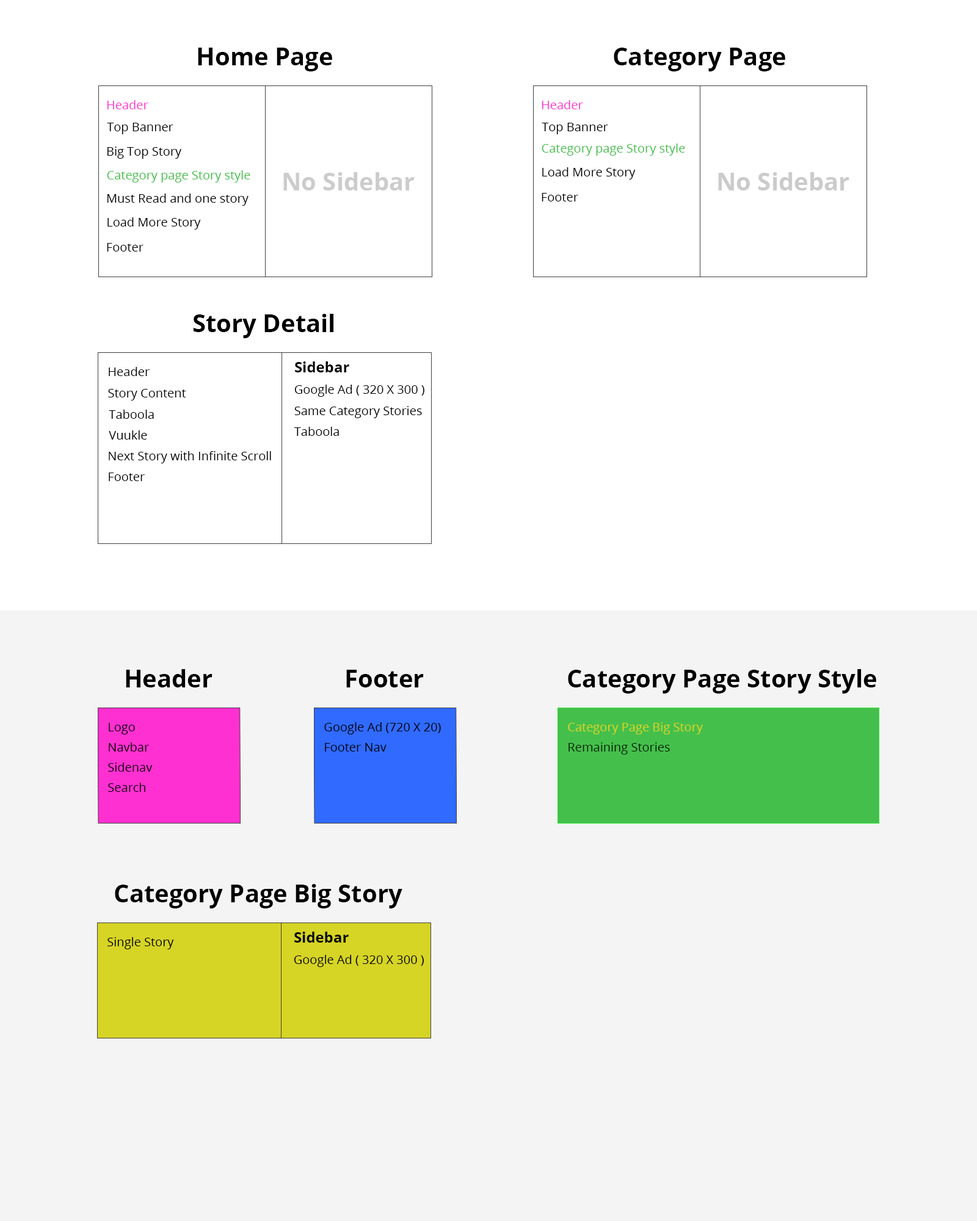
<style>
.page{position:relative;width:977px;height:1221px;background:#ffffff}
.page>*{position:absolute;margin:0}
.t1{font:24.4px "OpenSans-Bold";color:#000000}
.t2{font:12.2px "OpenSans-Regular";color:#ff30d1}
.t3{font:12.2px "OpenSans-Regular";color:#000000}
.t4{font:12.2px "OpenSans-Regular";color:#45bf4b}
.t5{font:24.4px "OpenSans-Bold";color:#cbcbcb}
.t6{font:14.7px "OpenSans-Bold";color:#000000}
.t7{font:12.2px/20.1px "OpenSans-Regular";color:#000000}
.t8{font:12.2px/20.1px "OpenSans-Regular";color:#d6d425}
.t9{font:12.2px/20.1px "OpenSans-Regular";color:#052107}
</style>
<div class="page">
<p class="t1" style="left:198px;top:48px;width:134px;height:23px">Home Page</p>
<p class="t1" style="left:613px;top:48px;width:172px;height:23px">Category Page</p>
<p class="t2" style="left:107px;top:100px;width:41px;height:9px">Header</p>
<p class="t2" style="left:541px;top:100px;width:42px;height:9px">Header</p>
<p class="t3" style="left:107px;top:123px;width:66px;height:11px">Top Banner</p>
<p class="t3" style="left:541px;top:123px;width:67px;height:11px">Top Banner</p>
<p class="t3" style="left:107px;top:147px;width:74px;height:12px">Big Top Story</p>
<p class="t4" style="left:541px;top:143px;width:144px;height:13px">Category page Story style</p>
<p class="t4" style="left:107px;top:170px;width:143px;height:13px">Category page Story style</p>
<p class="t5" style="left:283px;top:172px;width:131px;height:18px">No Sidebar</p>
<p class="t3" style="left:542px;top:167px;width:93px;height:12px">Load More Story</p>
<p class="t5" style="left:718px;top:172px;width:131px;height:18px">No Sidebar</p>
<p class="t3" style="left:107px;top:194px;width:141px;height:12px">Must Read and one story</p>
<p class="t3" style="left:541px;top:193px;width:37px;height:8px">Footer</p>
<p class="t3" style="left:107px;top:217px;width:94px;height:13px">Load More Story</p>
<p class="t3" style="left:107px;top:243px;width:36px;height:9px">Footer</p>
<p class="t1" style="left:193px;top:314px;width:141px;height:24px">Story Detail</p>
<p class="t6" style="left:295px;top:361px;width:54px;height:11px">Sidebar</p>
<p class="t3" style="left:109px;top:367px;width:41px;height:9px">Header</p>
<p class="t3" style="left:108px;top:389px;width:78px;height:11px">Story Content</p>
<p class="t3" style="left:294px;top:385px;width:130px;height:12px">Google Ad ( 320 X 300 )</p>
<p class="t3" style="left:109px;top:410px;width:45px;height:9px">Taboola</p>
<p class="t3" style="left:294px;top:406px;width:128px;height:12px">Same Category Stories</p>
<p class="t3" style="left:109px;top:430px;width:38px;height:10px">Vuukle</p>
<p class="t3" style="left:294px;top:427px;width:45px;height:9px">Taboola</p>
<p class="t3" style="left:109px;top:451px;width:162px;height:12px">Next Story with Infinite Scroll</p>
<p class="t3" style="left:109px;top:472px;width:36px;height:9px">Footer</p>
<p class="t1" style="left:126px;top:669px;width:86px;height:18px">Header</p>
<p class="t1" style="left:346px;top:670px;width:78px;height:17px">Footer</p>
<p class="t1" style="left:568px;top:669px;width:308px;height:24px">Category Page Story Style</p>
<p class="t7" style="left:108px;top:723px;width:45px;height:69px">Logo<br>Navbar<br>Sidenav<br>Search</p>
<p class="t7" style="left:324px;top:722px;width:117px;height:29px">Google Ad (720 X 20)<br>Footer Nav</p>
<p class="t8" style="left:568px;top:722px;width:135px;height:33px">Category Page Big Story<br><span class="t9">Remaining Stories</span></p>
<p class="t1" style="left:115px;top:884px;width:287px;height:24px">Category Page Big Story</p>
<p class="t3" style="left:107px;top:937px;width:67px;height:12px">Single Story</p>
<p class="t6" style="left:294px;top:932px;width:55px;height:11px">Sidebar</p>
<p class="t3" style="left:294px;top:955px;width:130px;height:12px">Google Ad ( 320 X 300 )</p>
</div>
